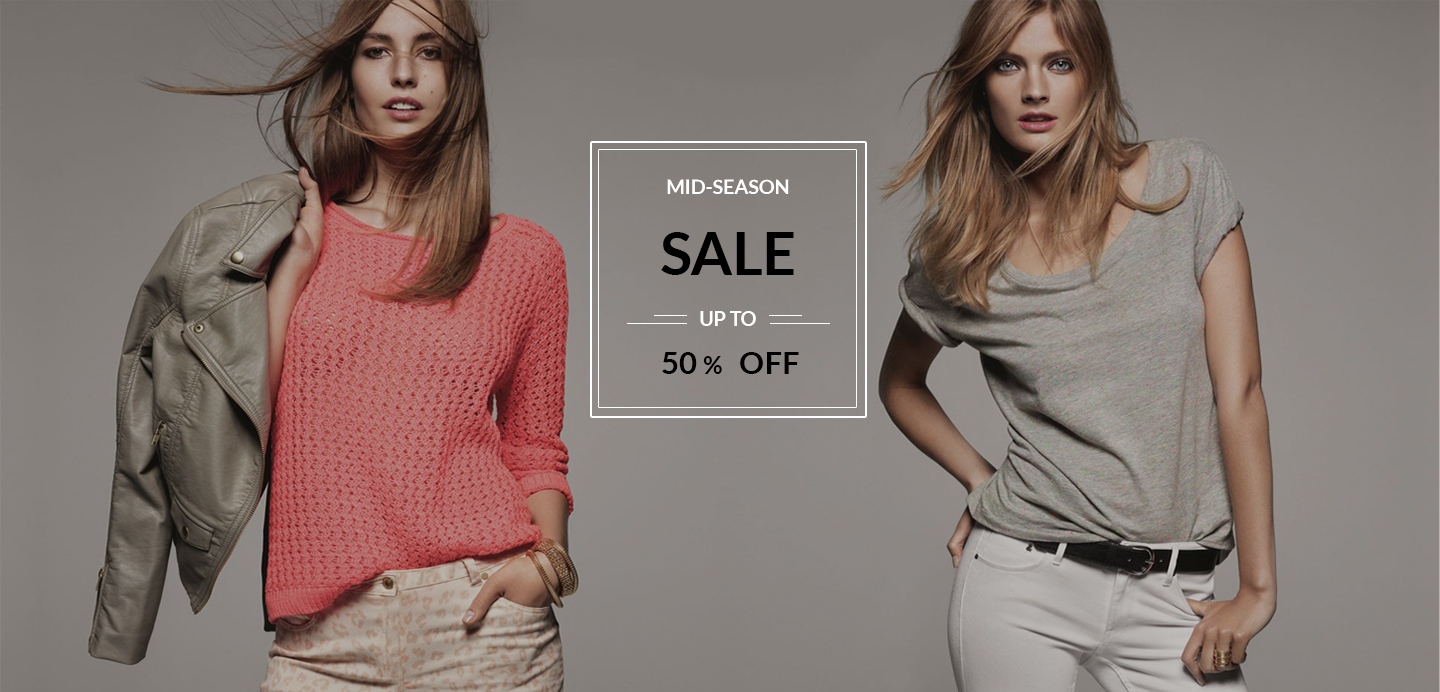
<style>
.page{position:relative;width:1440px;height:692px}
.page>*{position:absolute;margin:0}
.t1{font:19.4px "Lato-Bold";color:#ffffff}
.t2{font:58.8px "Lato-Bold";color:#000000}
.t3{font:19.6px "Lato-Bold";color:#ffffff}
.t4{font:31.4px "Lato-Bold";color:#000000}
.t5{font:23.5px "Lato-Bold";color:#000000}
</style>
<div class="page">
<p class="t1" style="left:667px;top:179px;width:122px;height:15px">MID-SEASON</p>
<p class="t2" style="left:661px;top:232px;width:133px;height:43px">SALE</p>
<p class="t3" style="left:700px;top:311px;width:56px;height:15px">UP TO</p>
<p class="t4" style="left:662px;top:352px;width:137px;height:22px">50<span class="t5"> %</span>   OFF</p>
</div>
